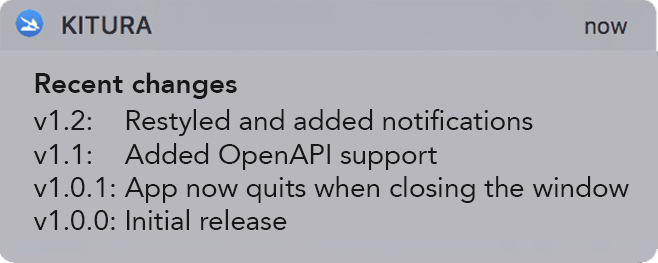
<style>
.page{position:relative;width:658px;height:263px;background:#b7b7bd}
.page>*{position:absolute;margin:0}
.t1{font:27.8px "Avenir-Heavy";color:#171618}
.t2{font:27.8px "Avenir-Roman";color:#171618}
</style>
<div class="page">
<p class="t1" style="left:35px;top:72px;width:202px;height:27px">Recent changes</p>
<p class="t2" style="left:33px;top:109px;width:596px;height:121px">v1.2:    Restyled and added notifications<br>v1.1:    Added OpenAPI support<br>v1.0.1: App now quits when closing the window<br>v1.0.0: Initial release</p>
</div>
